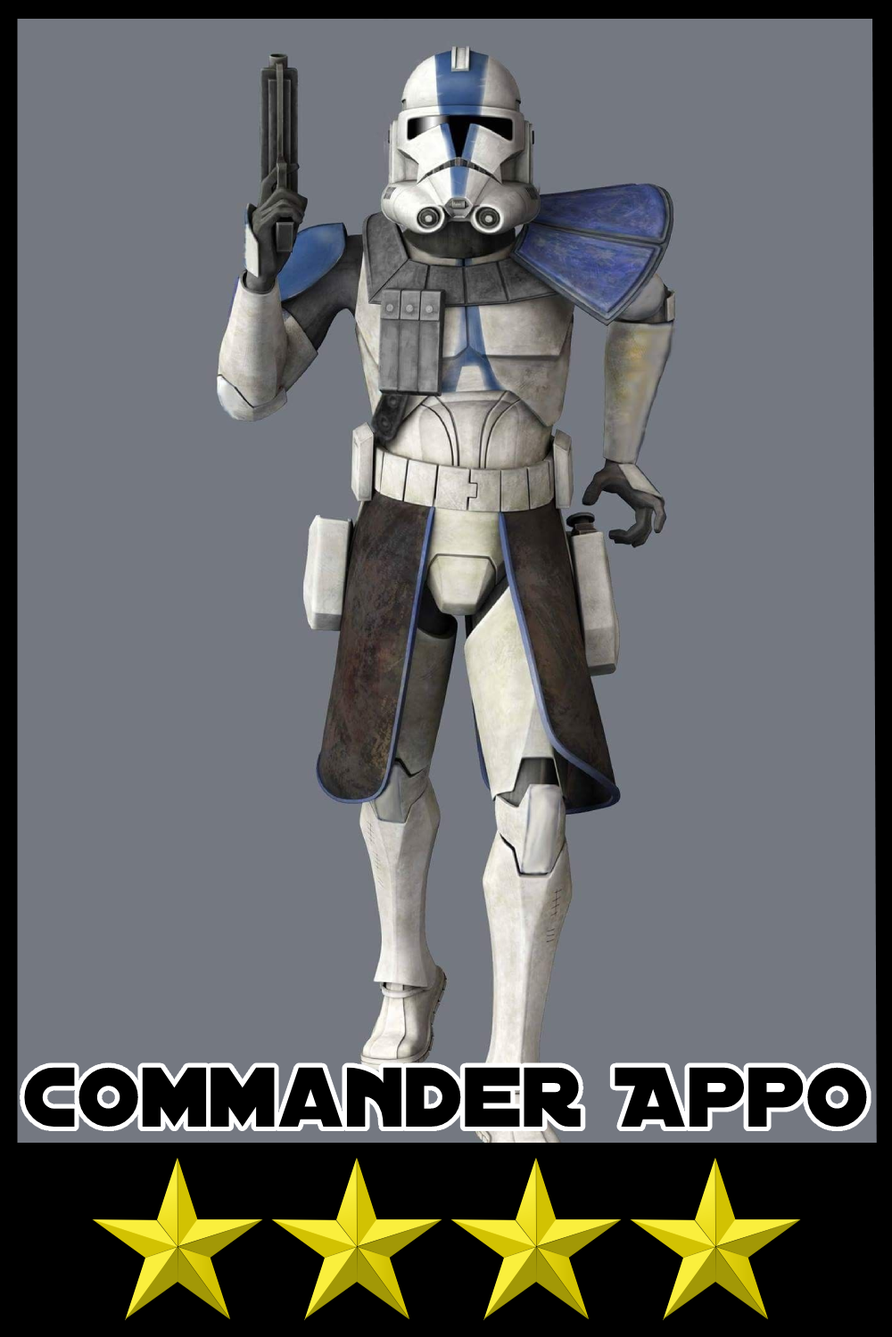
<style>
.page{position:relative;width:892px;height:1337px;background:#747881}
.page>*{position:absolute;margin:0}
.t1{font:90.8px "DistantGalaxy";color:#000000}
</style>
<div class="page">
<p class="t1" style="left:24px;top:1067px;width:843px;height:60px">Commander Appo</p>
</div>
